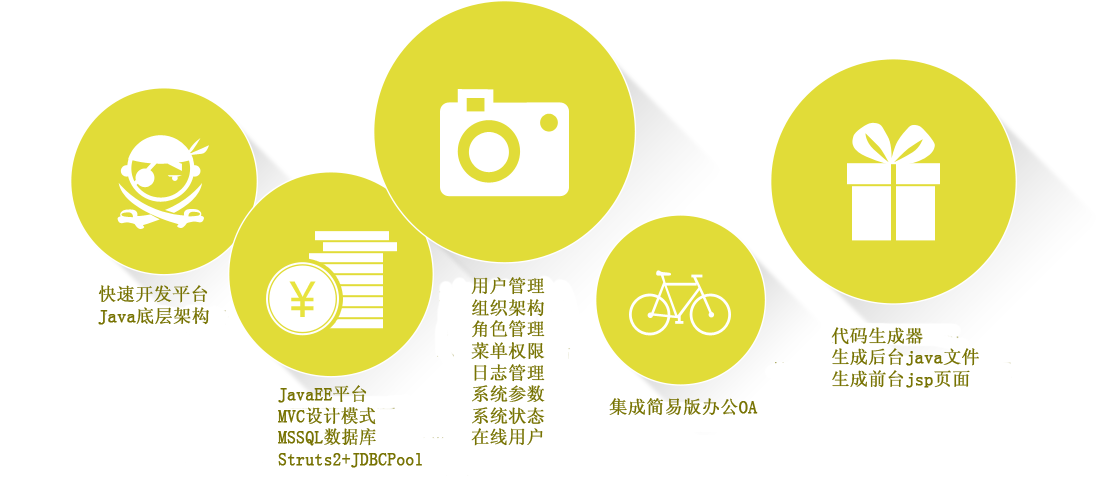
<style>
.page{position:relative;width:1099px;height:487px;background:#ffffff}
.page>*{position:absolute;margin:0}
.t1{font:18px "NSimSun";color:#777303;font-weight:bold}
.t2{font:18px "NSimSun";color:#777303;font-weight:bold;scale:0.96 1}
</style>
<div class="page">
<p class="t1" style="left:471px;top:277px;width:74px;height:169px">用户管理<br>组织架构<br>角色管理<br>菜单权限<br>日志管理<br>系统参数<br>系统状态<br>在线用户</p>
<p class="t1" style="left:98px;top:285px;width:111px;height:40px">快速开发平台<br>Java底层架构</p>
<p class="t1" style="left:831px;top:327px;width:148px;height:61px">代码生成器<br>生成后台java文件<br>生成前台jsp页面</p>
<p class="t2" style="left:278px;top:385px;width:144px;height:83px">JavaEE平台 <br>MVC设计模式 <br>MSSQL数据库 <br>Struts2+JDBCPool</p>
<p class="t1" style="left:609px;top:398px;width:149px;height:18px">集成简易版办公OA</p>
</div>
